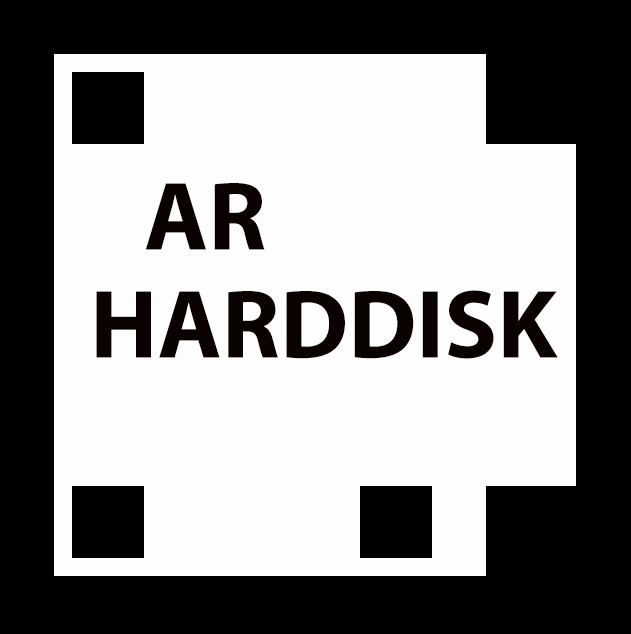
<style>
.page{position:relative;width:631px;height:634px;background:#fdfdfd}
.page>*{position:absolute;margin:0}
.t1{font:98px "MyriadPro-Bold";color:#0a0101}
</style>
<div class="page">
<p class="t1" style="left:145px;top:183px;width:120px;height:67px">AR</p>
<p class="t1" style="left:96px;top:290px;width:462px;height:69px">HARDDISK</p>
</div>
